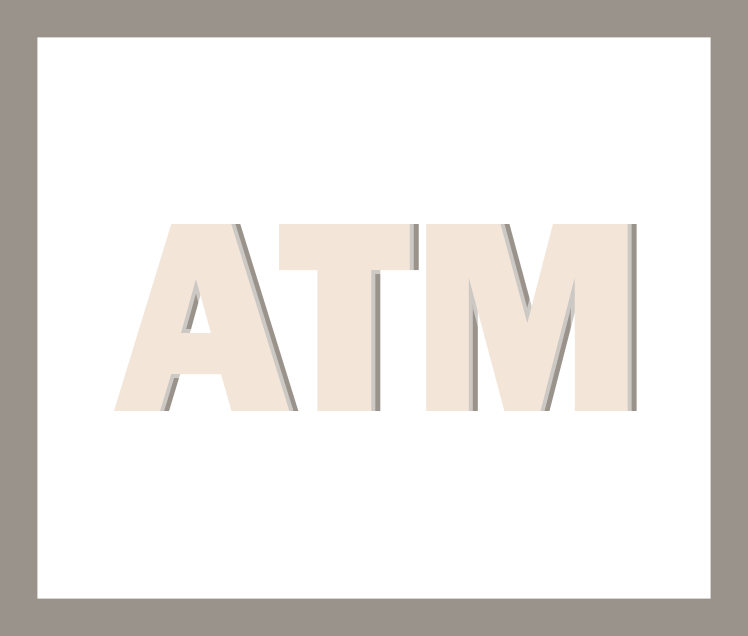
<style>
.page{position:relative;width:748px;height:636px;background:#ffffff}
.page>*{position:absolute;margin:0}
.t1{font:281.4px "FranklinGothic-Heavy";color:#f3e6d9}
</style>
<div class="page">
<p class="t1" style="left:122px;top:224px;width:515px;height:187px">ATM</p>
</div>
